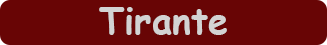
<style>
.page{position:relative;width:327px;height:45px;background:#680505}
.page>*{position:absolute;margin:0}
.t1{font:36px "ComicSansMS-Bold";color:#d3d3d3}
</style>
<div class="page">
<p class="t1" style="left:99px;top:7px;width:128px;height:28px">Tirante</p>
</div>
